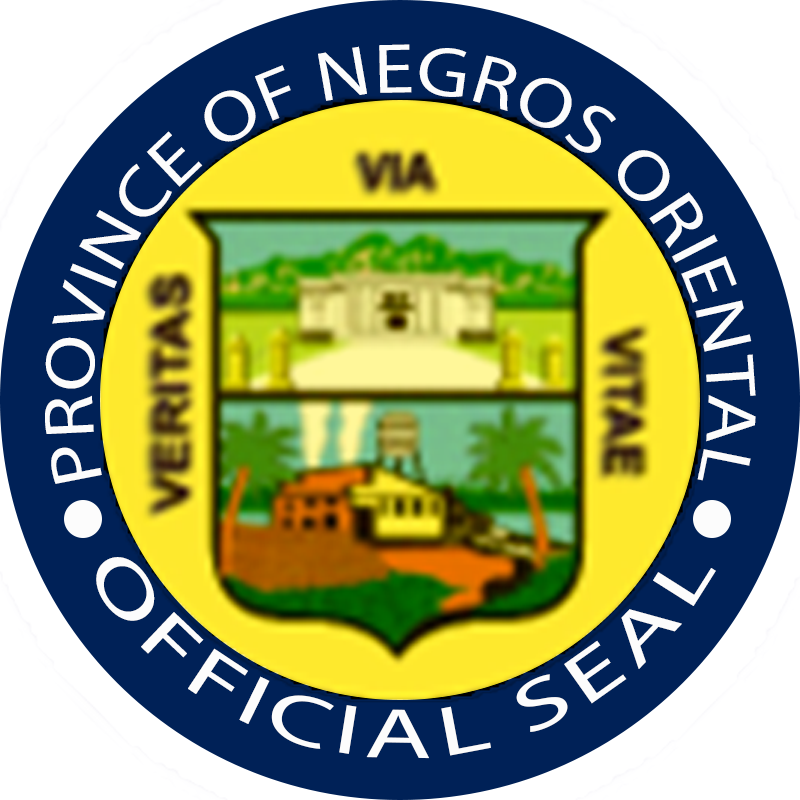
<style>
.page{position:relative;width:800px;height:800px;background:#002157}
.page>*{position:absolute;margin:0}
.t1{font:70.8px "MyriadPro-Regular";color:#fcfcfc;scale:1.16 1}
.t2{font:70.8px "MyriadPro-Regular";color:#fcfcfc;scale:1.56 1}
</style>
<div class="page">
<p class="t1" style="left:45px;top:44px;width:711px;height:440px;text-align:center">PROVINCE OF NEGROS ORIENTAL</p>
<p class="t2" style="left:96px;top:557px;width:620px;height:202px;text-align:center">OFFICIAL SEAL</p>
</div>
